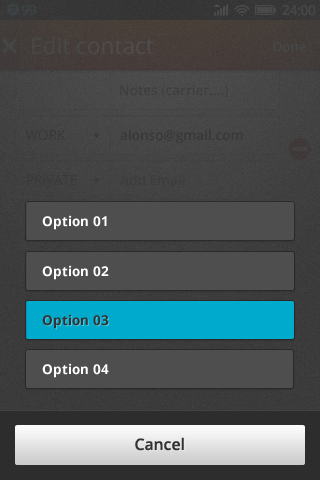
<style>
.page{position:relative;width:320px;height:480px}
.page>*{position:absolute;margin:0}
.t1{font:13.6px "OpenSans-Bold";color:#ffffff}
.t2{font:13.6px "OpenSans-Bold";color:#333333}
.t3{font:15.8px "OpenSans-Semibold";color:#333333}
</style>
<div class="page">
<p class="t1" style="left:42px;top:215px;width:65px;height:15px">Option 01</p>
<p class="t1" style="left:42px;top:215px;width:65px;height:15px">Option 01</p>
<p class="t1" style="left:42px;top:265px;width:67px;height:15px">Option 02</p>
<p class="t1" style="left:42px;top:265px;width:67px;height:15px">Option 02</p>
<p class="t2" style="left:42px;top:314px;width:67px;height:15px">Option 03</p>
<p class="t2" style="left:42px;top:314px;width:67px;height:15px">Option 03</p>
<p class="t1" style="left:42px;top:363px;width:67px;height:15px">Option 04</p>
<p class="t1" style="left:42px;top:363px;width:67px;height:15px">Option 04</p>
<p class="t3" style="left:135px;top:437px;width:49px;height:14px">Cancel</p>
<p class="t3" style="left:135px;top:437px;width:49px;height:14px">Cancel</p>
</div>
